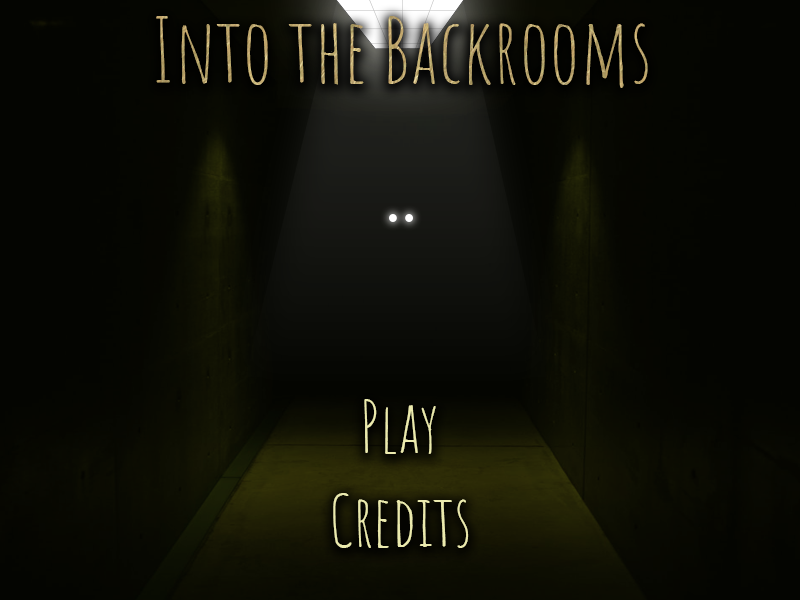
<style>
.page{position:relative;width:800px;height:600px;background:#040501}
.page>*{position:absolute;margin:0}
.t1{font:88.9px "AmaticSC-Regular";color:#bba66c}
.t2{font:71.1px "AmaticSC-Regular";color:#ebeaae}
</style>
<div class="page">
<p class="t1" style="left:156px;top:16px;width:492px;height:72px">Into the Backrooms</p>
<p class="t2" style="left:364px;top:399px;width:72px;height:55px">Play</p>
<p class="t2" style="left:333px;top:493px;width:136px;height:55px">Credits</p>
</div>
